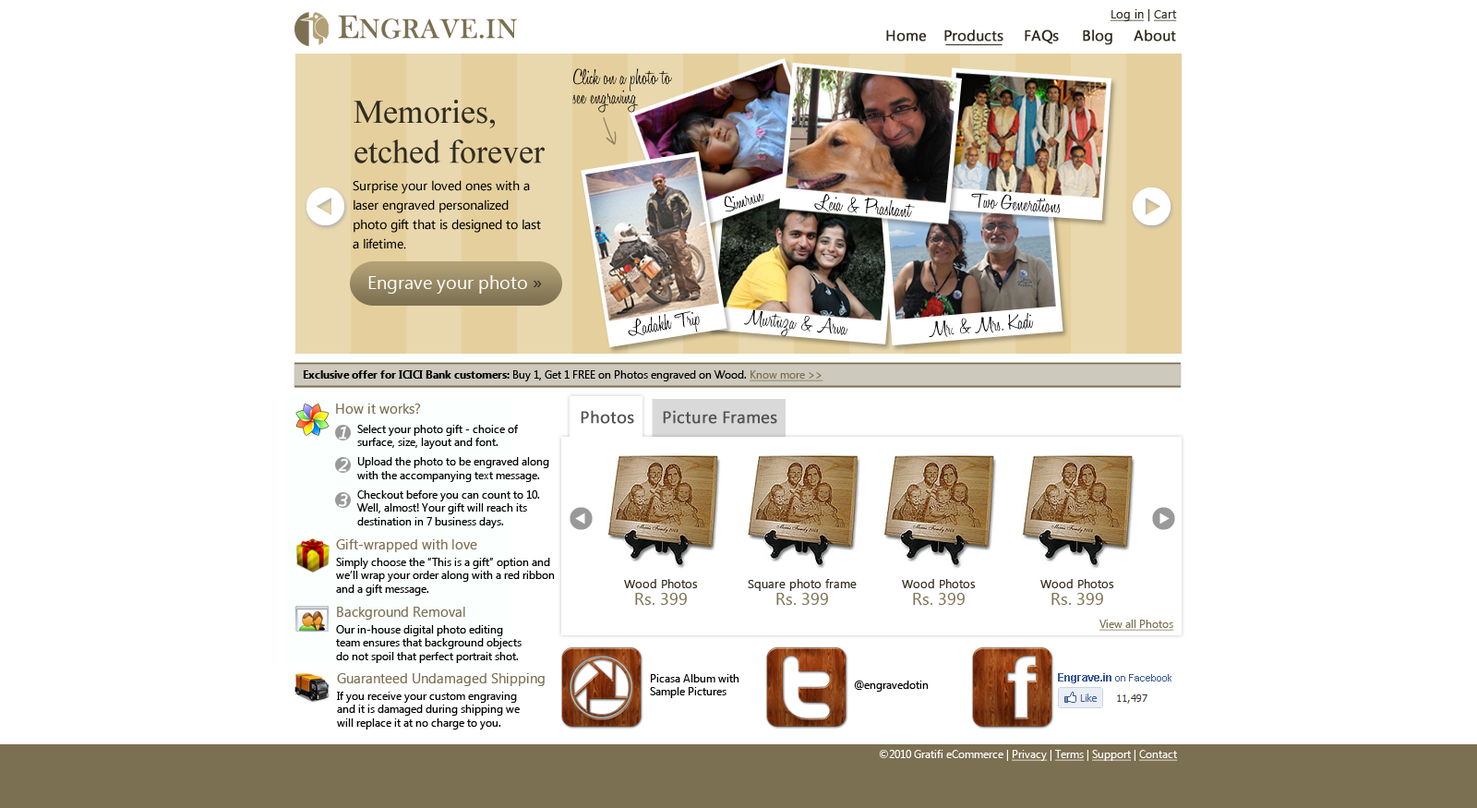
<style>
.page{position:relative;width:1477px;height:808px;background:#ffffff}
.page>*{position:absolute;margin:0}
.t1{font:27.7px "BaskOldFace";color:#7c7052;font-weight:bold}
.t2{font:33.2px "BaskOldFace";color:#7c7052;font-weight:bold}
.t3{font:12px "SegoeUI";color:#312c20;text-decoration:underline}
.t4{font:12px "SegoeUI";color:#312c20}
.t5{font:14.8px "SegoeUI";color:#312c20;font-weight:bold}
.t6{font:14.8px "SegoeUISymbol";color:#312c20;font-weight:bold}
.t7{font:22.1px/19.4px "HoneyScript-Light";color:#000000}
.t8{font:33.2px "TimesNewRomanPSMT";color:#312c20}
.t9{font:12.9px/19.4px "SegoeUI";color:#000000}
.t10{font:22.1px "HoneyScript-Light";color:#000000}
.t11{font:18.5px "SegoeUI";color:#fefefe}
.t12{font:18.5px "SegoeUI";color:#312c20}
.t13{font:11.1px "SegoeUI";color:#000000}
.t14{font:11.1px "SegoeUI-Bold";color:#000000}
.t15{font:11.1px "SegoeUI";color:#7c7052;text-decoration:underline}
.t16{font:13.8px "SegoeUI";color:#7c7052}
.t17{font:11.1px/19.4px "SegoeUI";color:#000000}
.t18{font:16.6px "SegoeUI";color:#545454;font-weight:bold}
.t19{font:16.6px "SegoeUI-Italic";color:#ffffff;font-weight:bold}
.t20{font:11.1px/16.6px "SegoeUI";color:#000000}
.t21{font:12px/16.6px "SegoeUI";color:#312c20}
.t22{font:16.6px/16.6px "SegoeUI";color:#7c7052}
.t23{font:10.2px "ArialMT";color:#3b5998}
.t24{font:11.1px "Arial-BoldMT";color:#3b5998}
.t25{font:11.1px "SegoeUI";color:#ffffff}
.t26{font:11.1px "SegoeUI";color:#ffffff;text-decoration:underline}
</style>
<div class="page">
<p class="t1" style="left:338px;top:15px;width:179px;height:24px"><span class="t2">E</span>NGRAVE.IN</p>
<p class="t3" style="left:1110px;top:9px;width:67px;height:12px">Log in<span class="t4"> | </span>Cart</p>
<p class="t5" style="left:886px;top:30px;width:40px;height:12px">Home</p>
<p class="t5" style="left:944px;top:30px;width:59px;height:12px">Products</p>
<p class="t5" style="left:1024px;top:30px;width:35px;height:14px">FAQs</p>
<p class="t6" style="left:1083px;top:30px;width:29px;height:15px">Blog</p>
<p class="t5" style="left:1133px;top:30px;width:43px;height:12px">About</p>
<p class="t7" style="left:572px;top:68px;width:100px;height:45px">Click on a photo to<br>see engraving</p>
<p class="t8" style="left:353px;top:100px;width:192px;height:63px">Memories,<br>etched forever</p>
<p class="t9" style="left:353px;top:180px;width:188px;height:69px">Surprise your loved ones with a <br>laser engraved personalized <br>photo gift that is designed to last <br>a lifetime.</p>
<p class="t10" style="left:724px;top:193px;width:39px;height:18px;rotate:-17deg">Simrun</p>
<p class="t10" style="left:814px;top:194px;width:101px;height:23px;rotate:5deg">Leia &amp; Prashant</p>
<p class="t10" style="left:971px;top:193px;width:88px;height:20px;rotate:4deg">Two Generations</p>
<p class="t11" style="left:368px;top:275px;width:174px;height:18px">Engrave your photo <span class="t12">»</span></p>
<p class="t10" style="left:628px;top:311px;width:72px;height:25px;rotate:-9deg">Ladakh Trip</p>
<p class="t10" style="left:743px;top:309px;width:105px;height:28px;rotate:6deg">Murtuza &amp; Arva</p>
<p class="t10" style="left:928px;top:312px;width:106px;height:25px;rotate:-5deg">Mr. &amp; Mrs. Kadi</p>
<p class="t13" style="left:303px;top:370px;width:520px;height:11px"><span class="t14">Exclusive offer for ICICI Bank customers:</span> Buy 1, Get 1 FREE on Photos engraved on Wood. <span class="t15">Know more &gt;&gt;</span></p>
<p class="t13" style="left:336px;top:403px;width:213px;height:125px"><span class="t16">How it works?<br></span><span class="t17">        Select your photo gift - choice of <br></span>        surface, size, layout and font.<br><span class="t17">        Upload the photo to be engraved along<br></span>        with the accompanying text message.<br><span class="t17">        Checkout before you can count </span>to 10. <br>        Well, almost! Your gift will reach its <br>        destination in 7 business days.</p>
<p class="t18" style="left:581px;top:410px;width:53px;height:14px">Photos</p>
<p class="t18" style="left:663px;top:410px;width:114px;height:14px">Picture Frames</p>
<p class="t19" style="left:339px;top:425px;width:8px;height:14px">1</p>
<p class="t19" style="left:338px;top:458px;width:10px;height:14px">2</p>
<p class="t19" style="left:339px;top:493px;width:9px;height:14px">3</p>
<p class="t13" style="left:336px;top:539px;width:219px;height:56px"><span class="t16">Gift-wrapped with love<br></span><span class="t20">Simply choose </span>the “This is a gift” option and<br>we’ll wrap your order along with a red ribbon<br>and a gift message.</p>
<p class="t21" style="left:624px;top:579px;width:74px;height:25px;text-align:center">Wood Photos<br><span class="t22">Rs. 399</span></p>
<p class="t21" style="left:748px;top:579px;width:108px;height:25px;text-align:center">Square photo frame<br><span class="t22">Rs. 399</span></p>
<p class="t21" style="left:902px;top:579px;width:74px;height:25px;text-align:center">Wood Photos<br><span class="t22">Rs. 399</span></p>
<p class="t21" style="left:1040px;top:579px;width:74px;height:25px;text-align:center">Wood Photos<br><span class="t22">Rs. 399</span></p>
<p class="t13" style="left:336px;top:606px;width:185px;height:57px"><span class="t16">Background Removal<br></span><span class="t20">Our in-house digital photo editing <br></span>team ensures that background objects <br>do not spoil that perfect portrait shot.</p>
<p class="t15" style="left:1099px;top:619px;width:75px;height:11px">View all Photos</p>
<p class="t13" style="left:337px;top:673px;width:208px;height:56px"><span class="t16">Guaranteed Undamaged Shipping<br></span><span class="t20">If you receive your custom engraving <br></span>and it is damaged during shipping we <br>will replace it at no charge to you.</p>
<p class="t13" style="left:650px;top:674px;width:89px;height:24px">Picasa Album with<br>Sample Pictures</p>
<p class="t23" style="left:1058px;top:673px;width:113px;height:10px"><span class="t24">Engrave.in </span>on Facebook</p>
<p class="t13" style="left:854px;top:680px;width:74px;height:11px">@engravedotin</p>
<p class="t25" style="left:879px;top:749px;width:299px;height:11px">©2010 Gratifi eCommerce | <span class="t26">Privacy</span> | <span class="t26">Terms</span> | <span class="t26">Support</span> | <span class="t26">Contact</span></p>
</div>
